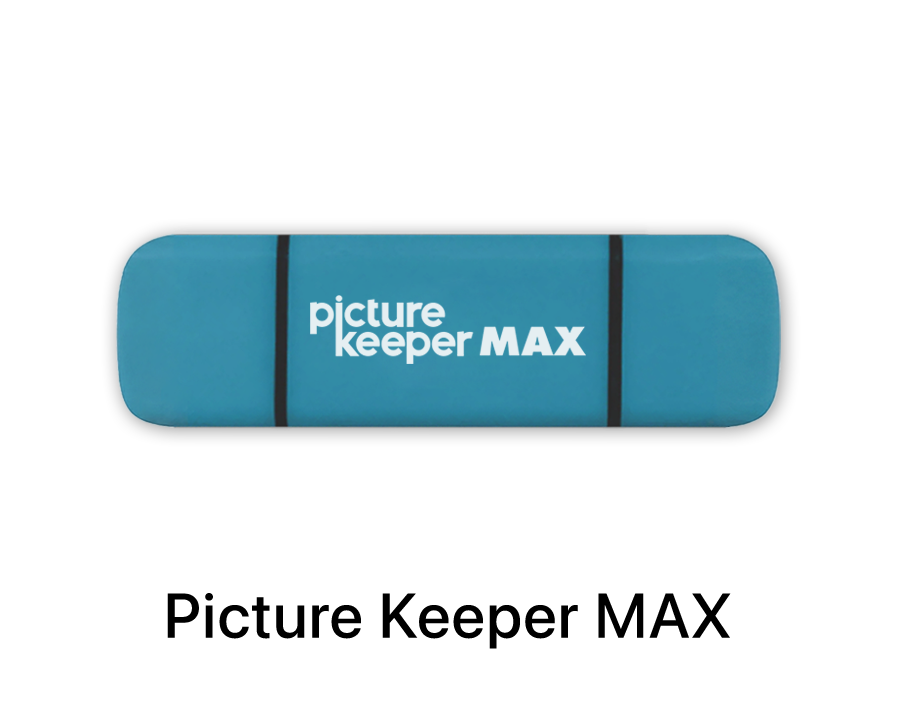
<style>
.page{position:relative;width:900px;height:720px;background:#ffffff}
.page>*{position:absolute;margin:0}
.t1{font:62.7px "SFPro-Medium";letter-spacing:0.025em;color:#000000}
</style>
<div class="page">
<p class="t1" style="left:167px;top:593px;width:564px;height:56px">Picture Keeper MAX</p>
</div>
